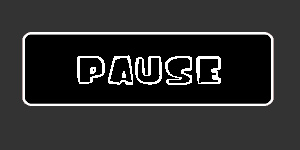
<style>
.page{position:relative;width:300px;height:150px;background:#333333}
.page>*{position:absolute;margin:0}
.t1{font:60px "iceagefont";color:#ffffff}
</style>
<div class="page">
<p class="t1" style="left:77px;top:55px;width:144px;height:30px">Pause</p>
</div>
